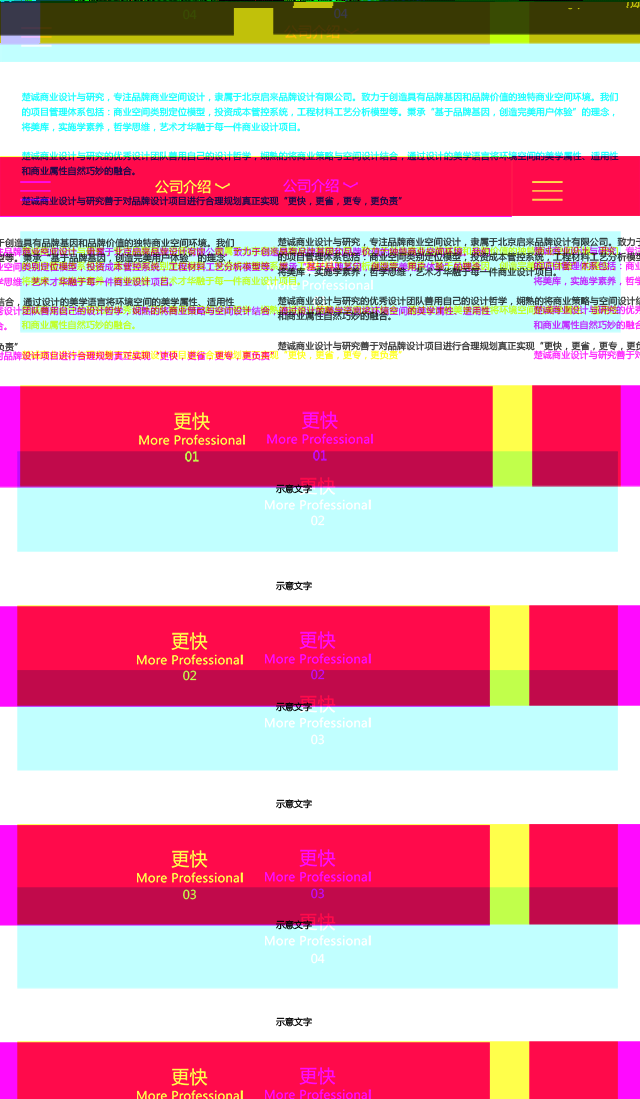
<style>
.page{position:relative;width:640px;height:1099px;background:#ffffff}
.page>*{position:absolute;margin:0}
.t1{font:9px/14.9px "MicrosoftYaHei";letter-spacing:0.02em}
</style>
<div class="page">
<p class="t1" style="left:21px;top:90px;width:598px;height:114px">楚诚商业设计与研究，专注品牌商业空间设计，隶属于北京启来品牌设计有限公司。致力于创造具有品牌基因和品牌价值的独特商业空间环境。我们<br>的项目管理体系包括：商业空间类别定位模型，投资成本管控系统，工程材料工艺分析模型等。秉承“基于品牌基因，创造完美用户体验”的理念，<br>将美库，实施学素养，哲学思维，艺术才华融于每一件商业设计项目。<br><br>楚诚商业设计与研究的优秀设计团队善用自己的设计哲学，娴熟的将商业策略与空间设计结合，通过设计的美学语言将环境空间的美学属性、适用性<br>和商业属性自然巧妙的融合。<br><br>楚诚商业设计与研究善于对品牌设计项目进行合理规划真正实现“更快，更省，更专，更负责”</p>
</div>
